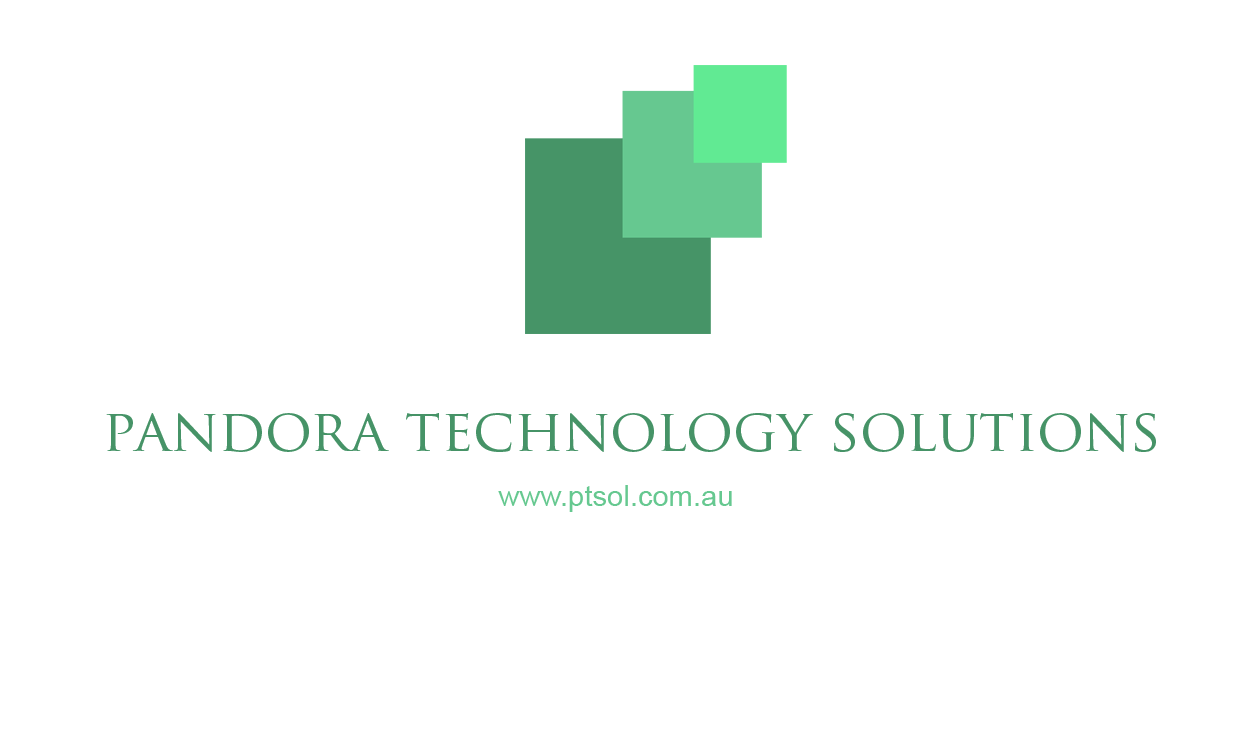
<style>
.page{position:relative;width:1260px;height:735px;background:#ffffff}
.page>*{position:absolute;margin:0}
.t1{font:58.3px "TrajanPro-Regular";color:#469367}
.t2{font:29.2px "ArialMT";color:#66c890}
</style>
<div class="page">
<p class="t1" style="left:106px;top:413px;width:1050px;height:39px">pandora technology solutions</p>
<p class="t2" style="left:498px;top:485px;width:234px;height:27px">www.ptsol.com.au</p>
</div>
